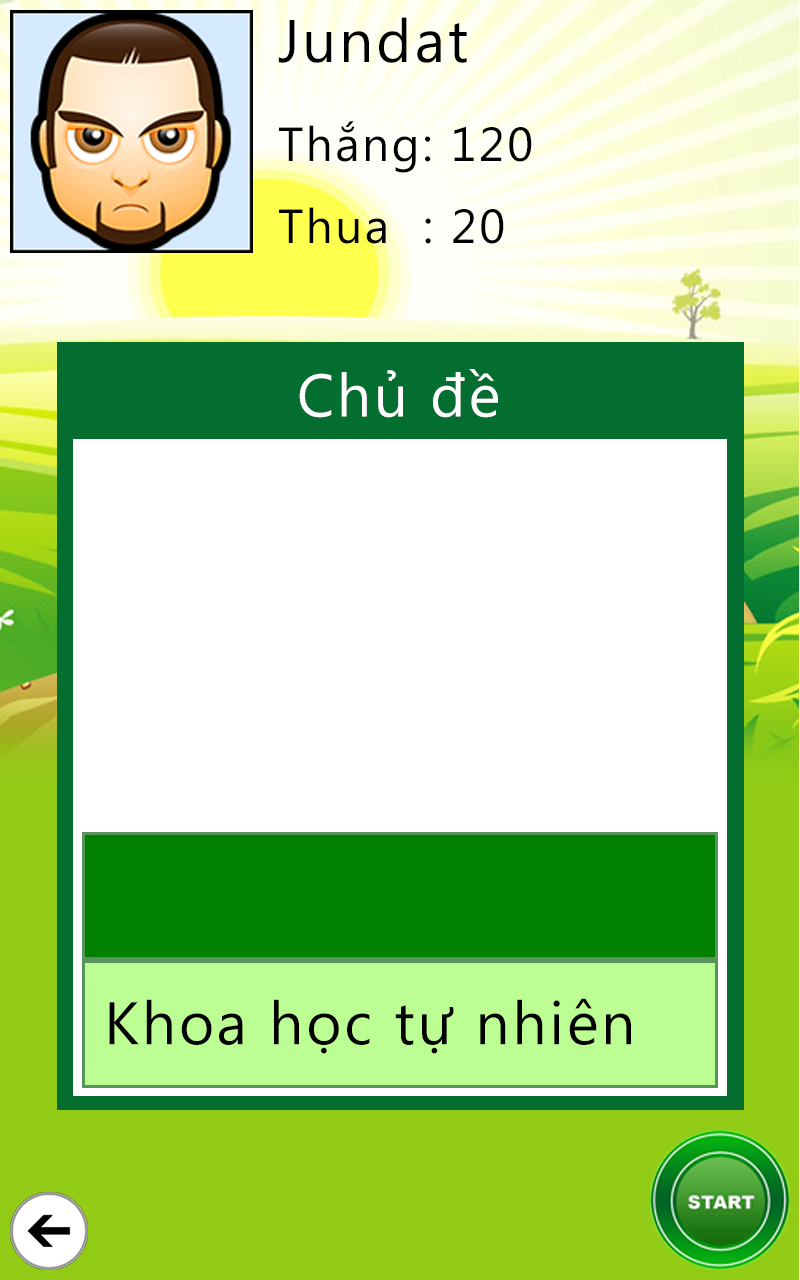
<style>
.page{position:relative;width:800px;height:1280px;background:#ffffff}
.page>*{position:absolute;margin:0}
.t1{font:60px "SegoeUI";letter-spacing:0.05em;color:#000000}
.t2{font:48px "SegoeUI";letter-spacing:0.05em;color:#000000}
.t3{font:59.9px "SegoeUI";letter-spacing:0.05em;color:#ffffff}
</style>
<div class="page">
<p class="t1" style="left:278px;top:17px;width:189px;height:46px">Jundat</p>
<p class="t2" style="left:279px;top:121px;width:253px;height:52px">Thắng: 120</p>
<p class="t2" style="left:279px;top:207px;width:225px;height:37px">Thua  : 20</p>
<p class="t3" style="left:299px;top:369px;width:199px;height:49px">Chủ đề</p>
<p class="t1" style="left:109px;top:998px;width:522px;height:56px">Khoa học tự nhiên</p>
</div>
